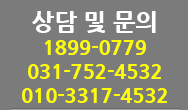
<style>
.page{position:relative;width:188px;height:110px;background:#7b7b7b}
.page>*{position:absolute;margin:0}
.t1{font:20px "NanumGothicExtraBold";color:#ffff00}
.t2{font:24px "NanumGothicExtraBold";color:#ffffff}
</style>
<div class="page">
<p class="t1" style="left:22px;top:11px;width:145px;height:92px;text-align:center"><span class="t2">상담 및 문의<br></span>1899-0779<br>031-752-4532<br>010-3317-4532</p>
</div>
